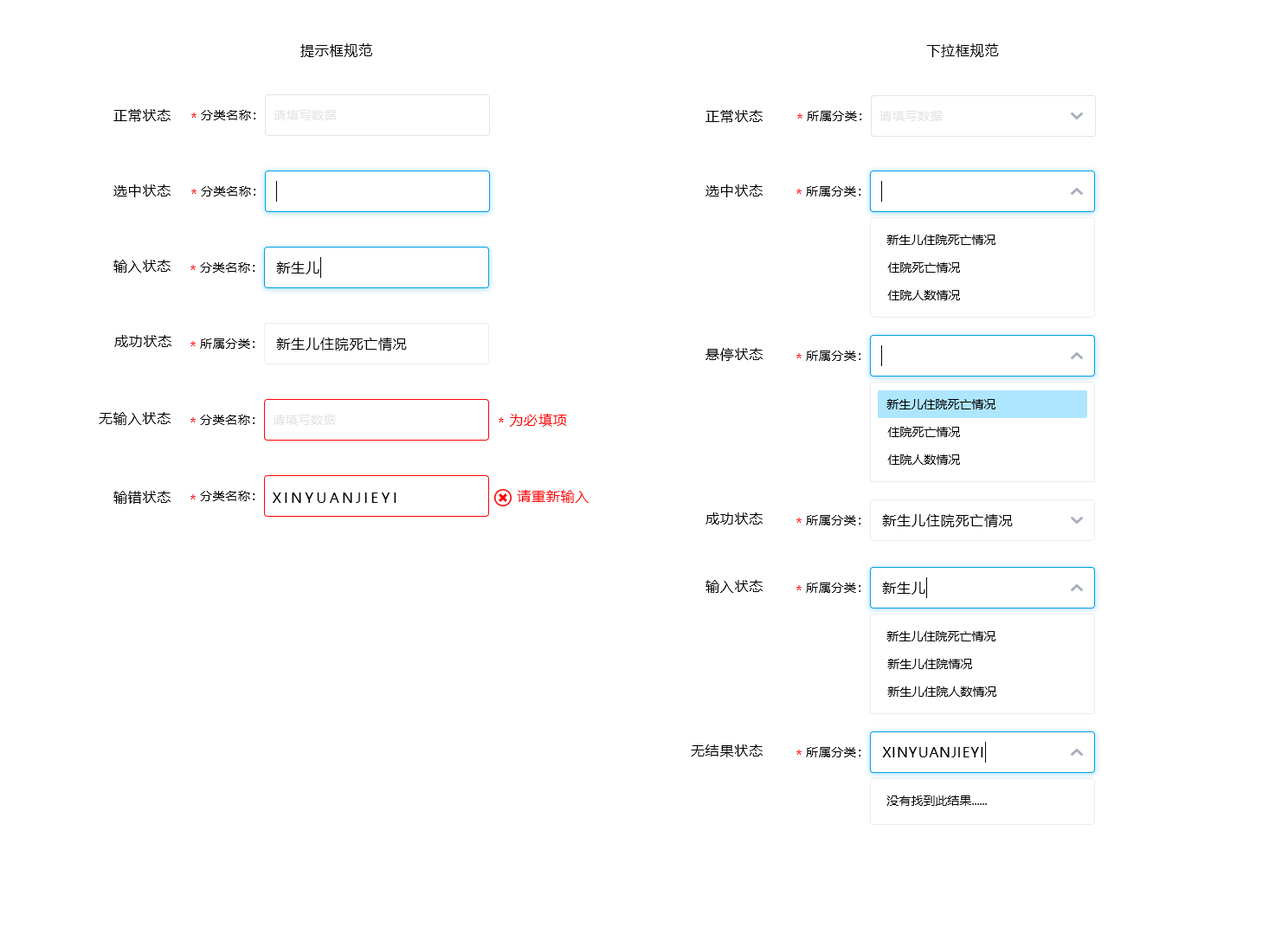
<style>
.page{position:relative;width:1269px;height:940px;background:#ffffff}
.page>*{position:absolute;margin:0}
.t1{font:13.8px "MicrosoftYaHei";letter-spacing:0.05em;color:#000000}
.t2{font:13.8px "MicrosoftYaHei";letter-spacing:0.05em;color:#ff0101}
.t3{font:12.1px "MicrosoftYaHei";letter-spacing:0.05em;color:#000000}
.t4{font:12.1px "MicrosoftYaHei";letter-spacing:0.05em;color:#e3e3e3}
.t5{font:12.1px "MicrosoftYaHei";color:#000000}
.t6{font:13.8px "MicrosoftYaHei";letter-spacing:0.2em;color:#000000}
</style>
<div class="page">
<p class="t1" style="left:300px;top:43px;width:72px;height:14px">提示框规范</p>
<p class="t1" style="left:926px;top:43px;width:73px;height:14px">下拉框规范</p>
<p class="t1" style="left:113px;top:109px;width:57px;height:13px">正常状态</p>
<p class="t2" style="left:191px;top:113px;width:5px;height:5px">*</p>
<p class="t3" style="left:201px;top:110px;width:54px;height:10px">分类名称：</p>
<p class="t4" style="left:273px;top:110px;width:64px;height:10px">请填写数据</p>
<p class="t1" style="left:705px;top:110px;width:57px;height:13px">正常状态</p>
<p class="t2" style="left:797px;top:113px;width:5px;height:6px">*</p>
<p class="t3" style="left:807px;top:111px;width:54px;height:10px">所属分类：</p>
<p class="t4" style="left:879px;top:111px;width:63px;height:10px">请填写数据</p>
<p class="t1" style="left:113px;top:184px;width:57px;height:13px">选中状态</p>
<p class="t1" style="left:705px;top:184px;width:57px;height:13px">选中状态</p>
<p class="t2" style="left:191px;top:189px;width:5px;height:5px">*</p>
<p class="t3" style="left:201px;top:186px;width:54px;height:10px">分类名称：</p>
<p class="t2" style="left:796px;top:189px;width:5px;height:5px">*</p>
<p class="t3" style="left:806px;top:186px;width:54px;height:10px">所属分类：</p>
<p class="t5" style="left:886px;top:235px;width:109px;height:10px">新生儿住院死亡情况</p>
<p class="t1" style="left:113px;top:260px;width:57px;height:13px">输入状态</p>
<p class="t2" style="left:190px;top:265px;width:6px;height:5px">*</p>
<p class="t3" style="left:200px;top:262px;width:54px;height:11px">分类名称：</p>
<p class="t1" style="left:276px;top:261px;width:43px;height:13px">新生儿</p>
<p class="t5" style="left:887px;top:262px;width:73px;height:11px">住院死亡情况</p>
<p class="t5" style="left:887px;top:290px;width:73px;height:10px">住院人数情况</p>
<p class="t1" style="left:114px;top:335px;width:57px;height:12px">成功状态</p>
<p class="t2" style="left:190px;top:341px;width:6px;height:5px">*</p>
<p class="t3" style="left:200px;top:338px;width:54px;height:11px">所属分类：</p>
<p class="t1" style="left:276px;top:338px;width:131px;height:13px">新生儿住院死亡情况</p>
<p class="t1" style="left:705px;top:348px;width:57px;height:13px">悬停状态</p>
<p class="t2" style="left:796px;top:353px;width:5px;height:5px">*</p>
<p class="t3" style="left:806px;top:351px;width:54px;height:10px">所属分类：</p>
<p class="t5" style="left:886px;top:399px;width:109px;height:10px">新生儿住院死亡情况</p>
<p class="t1" style="left:99px;top:412px;width:71px;height:13px">无输入状态</p>
<p class="t2" style="left:510px;top:414px;width:57px;height:13px">为必填项</p>
<p class="t2" style="left:190px;top:417px;width:6px;height:5px">*</p>
<p class="t3" style="left:200px;top:415px;width:54px;height:10px">分类名称：</p>
<p class="t4" style="left:273px;top:415px;width:63px;height:10px">请填写数据</p>
<p class="t2" style="left:498px;top:417px;width:6px;height:5px">*</p>
<p class="t5" style="left:887px;top:427px;width:73px;height:10px">住院死亡情况</p>
<p class="t5" style="left:887px;top:454px;width:73px;height:11px">住院人数情况</p>
<p class="t1" style="left:113px;top:491px;width:57px;height:13px">输错状态</p>
<p class="t2" style="left:190px;top:494px;width:6px;height:5px">*</p>
<p class="t3" style="left:200px;top:491px;width:54px;height:10px">分类名称：</p>
<p class="t6" style="left:273px;top:492px;width:123px;height:11px">XINYUANJIEYI</p>
<p class="t2" style="left:517px;top:490px;width:71px;height:13px">请重新输入</p>
<p class="t1" style="left:705px;top:512px;width:57px;height:12px">成功状态</p>
<p class="t2" style="left:796px;top:518px;width:5px;height:5px">*</p>
<p class="t3" style="left:806px;top:515px;width:54px;height:10px">所属分类：</p>
<p class="t1" style="left:882px;top:514px;width:131px;height:13px">新生儿住院死亡情况</p>
<p class="t1" style="left:705px;top:580px;width:57px;height:13px">输入状态</p>
<p class="t1" style="left:882px;top:582px;width:43px;height:13px">新生儿</p>
<p class="t2" style="left:796px;top:585px;width:5px;height:5px">*</p>
<p class="t3" style="left:806px;top:582px;width:54px;height:11px">所属分类：</p>
<p class="t5" style="left:886px;top:631px;width:109px;height:10px">新生儿住院死亡情况</p>
<p class="t5" style="left:887px;top:659px;width:85px;height:10px">新生儿住院情况</p>
<p class="t5" style="left:887px;top:686px;width:109px;height:11px">新生儿住院人数情况</p>
<p class="t1" style="left:691px;top:744px;width:71px;height:13px">无结果状态</p>
<p class="t2" style="left:796px;top:749px;width:5px;height:6px">*</p>
<p class="t3" style="left:806px;top:747px;width:54px;height:10px">所属分类：</p>
<p class="t1" style="left:882px;top:747px;width:101px;height:10px">XINYUANJIEYI</p>
<p class="t5" style="left:886px;top:795px;width:101px;height:11px">没有找到此结果......</p>
</div>
